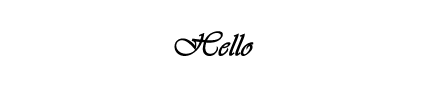
<style>
.page{position:relative;width:431px;height:100px;background:#ffffff}
.page>*{position:absolute;margin:0}
.t1{font:32px "Vivaldii";color:#000000;font-weight:bold}
</style>
<div class="page">
<p class="t1" style="left:174px;top:31px;width:80px;height:25px">Hello</p>
</div>
